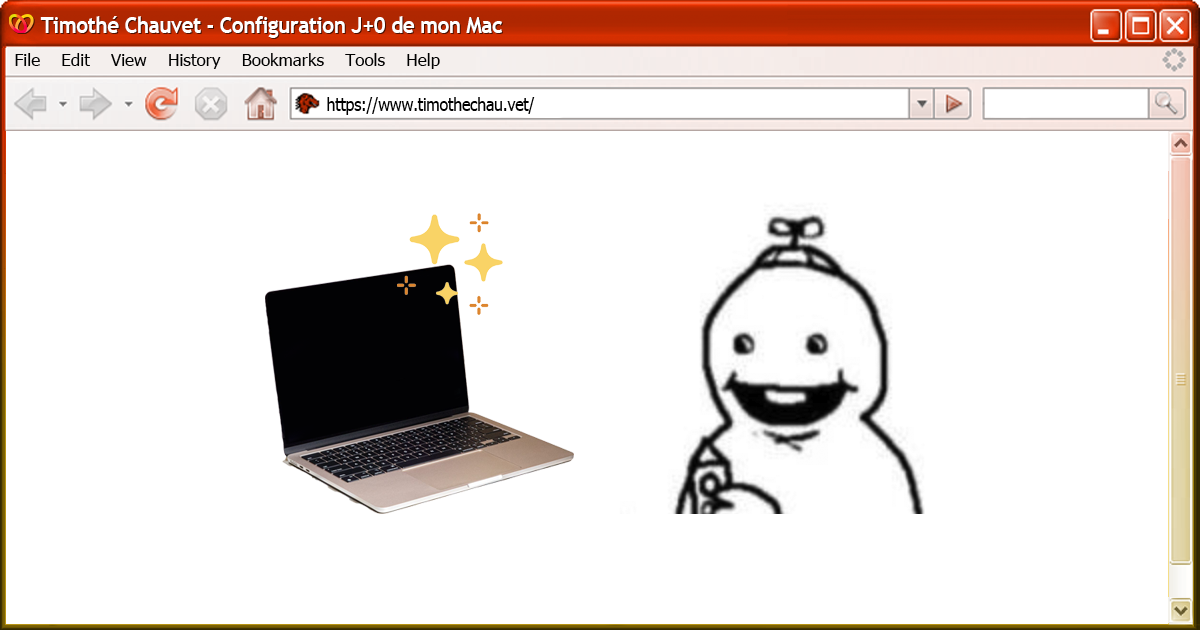
<style>
.page{position:relative;width:1200px;height:630px;background:#ffffff}
.page>*{position:absolute;margin:0}
.t1{font:23px "TrebuchetMS-Bold";letter-spacing:-0.02em;color:#ffffff;scale:0.9 1}
.t2{font:17px "Tahoma";color:#000000}
.t3{font:18px "Tahoma";letter-spacing:-0.02em;color:#000000;scale:0.9 1}
</style>
<div class="page">
<p class="t1" style="left:40px;top:16px;width:462px;height:22px">Timothé Chauvet - Configuration J+0 de mon Mac</p>
<p class="t2" style="left:15px;top:53px;width:425px;height:16px">File    Edit    View    History    Bookmarks    Tools    Help</p>
<p class="t3" style="left:327px;top:97px;width:208px;height:18px">https://www.timothechau.vet/</p>
</div>
